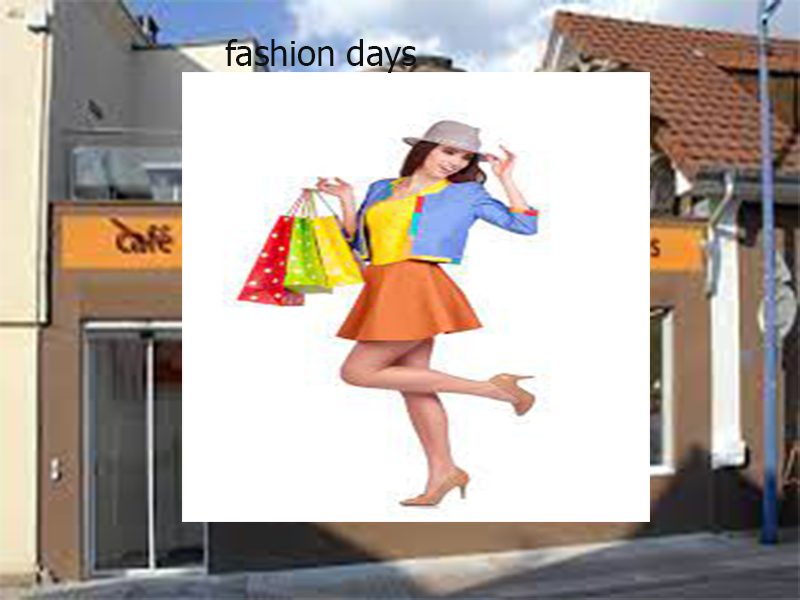
<style>
.page{position:relative;width:800px;height:600px;background:#ffffff}
.page>*{position:absolute;margin:0}
.t1{font:35px "Tahoma";color:#101010}
.t2{font:26px "Tahoma";color:#101010}
</style>
<div class="page">
<p class="t1" style="left:225px;top:39px;width:191px;height:34px"><span class="t2"><br></span>fashion days</p>
</div>
